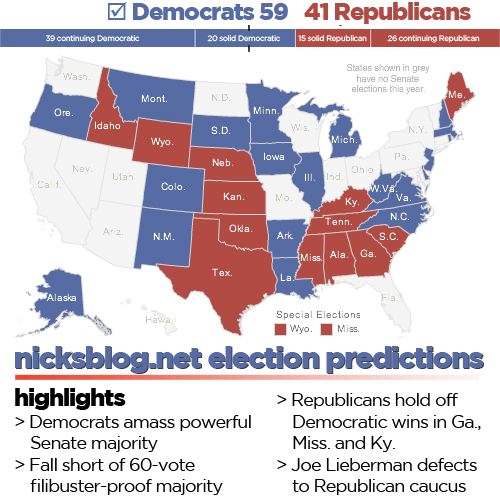
<style>
.page{position:relative;width:500px;height:500px;background:#ffffff}
.page>*{position:absolute;margin:0}
.t1{font:24px "GothamBlack";letter-spacing:-0.05em;color:#576ca4}
.t2{font:24px "Wingdings-Regular";letter-spacing:-0.05em;color:#576ca4}
.t3{font:24px "GothamBlack";letter-spacing:-0.05em;color:#b14a43}
.t4{font:8px "GothamBook";letter-spacing:-0.05em;color:#ffffff}
.t5{font:30px "GothamBlack";letter-spacing:-0.05em;color:#576ba4}
.t6{font:18px "GothamBook";letter-spacing:-0.05em;color:#000000}
.t7{font:24px "GothamBlack";letter-spacing:-0.05em;color:#000000}
</style>
<div class="page">
<p class="t1" style="left:108px;top:2px;width:180px;height:18px"><span class="t2">þ</span> Democrats 59</p>
<p class="t3" style="left:304px;top:2px;width:167px;height:22px">41 Republicans</p>
<p class="t4" style="left:46px;top:35px;width:94px;height:8px">39 continuing Democratic</p>
<p class="t4" style="left:207px;top:35px;width:73px;height:7px">20 solid Democratic</p>
<p class="t4" style="left:298px;top:35px;width:69px;height:8px">15 solid Republican</p>
<p class="t4" style="left:387px;top:35px;width:93px;height:8px">26 continuing Republican</p>
<p class="t5" style="left:15px;top:346px;width:469px;height:27px">nicksblog.net election predictions</p>
<p class="t6" style="left:15px;top:388px;width:236px;height:107px"><span class="t7">highlights<br></span>&gt; Democrats amass powerful<br>Senate majority<br>&gt; Fall short of 60-vote <br>filibuster-proof majority</p>
<p class="t6" style="left:277px;top:393px;width:204px;height:102px">&gt; Republicans hold off<br>Democratic wins in Ga., <br>Miss. and Ky.<br>&gt; Joe Lieberman defects<br>to Republican caucus</p>
</div>
